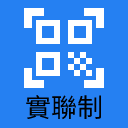
<style>
.page{position:relative;width:128px;height:128px;background:#2580f2}
.page>*{position:absolute;margin:0}
.t1{font:26px "NotoSansTC-Regular";color:#000000}
</style>
<div class="page">
<p class="t1" style="left:26px;top:95px;width:76px;height:25px">實聯制</p>
</div>
